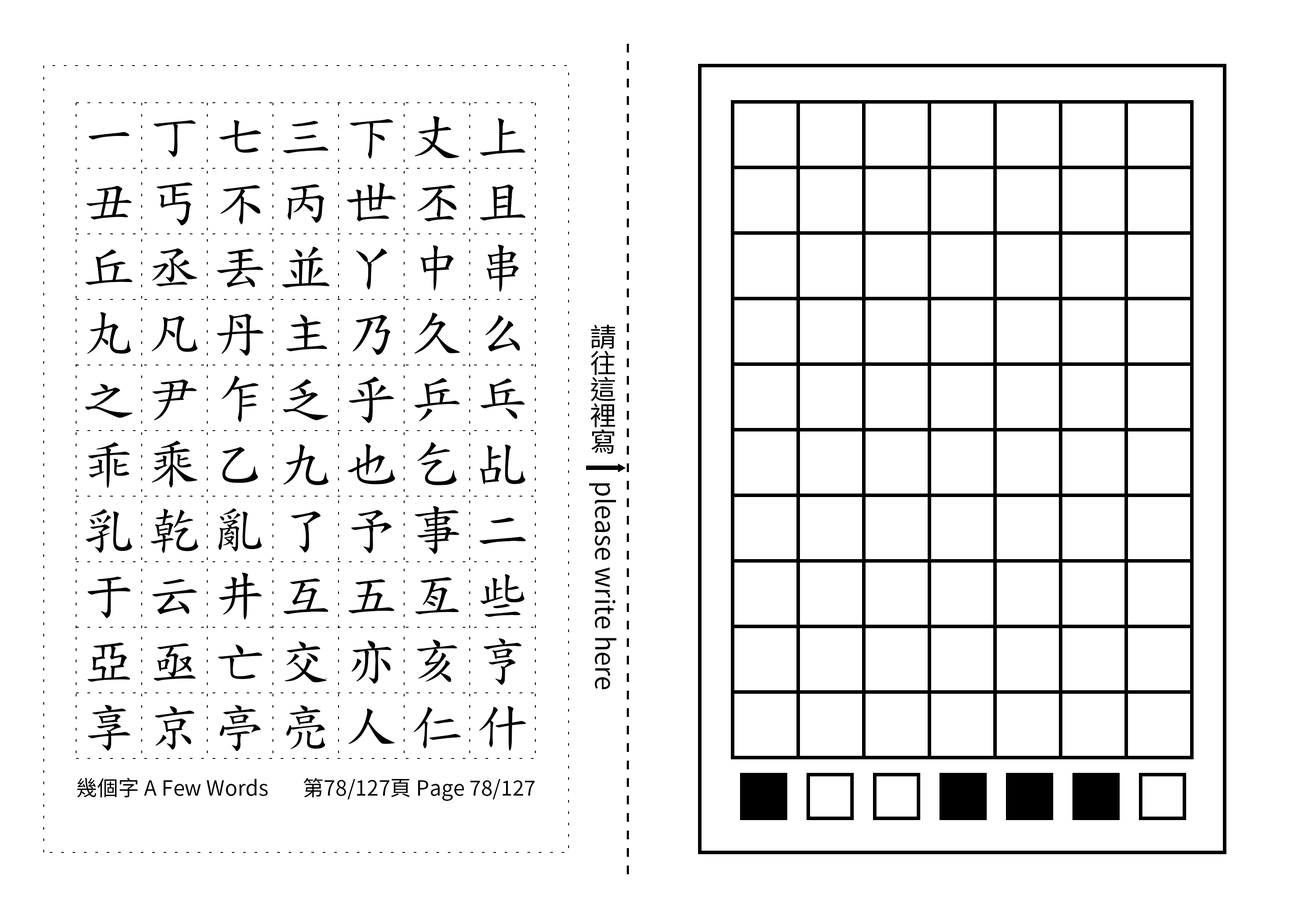
<style>
.page{position:relative;width:1299px;height:918px;background:#ffffff}
.page>*{position:absolute;margin:0}
.t1{font:52.5px/65.6px "TW-Kai-98_1";letter-spacing:0.25em;color:#000000}
.t2{font:26.2px "SourceHanSansTC-Regular";color:#000000}
.t3{font:21px "SourceHanSansTC-Regular";color:#000000}
</style>
<div class="page">
<p class="t1" style="left:85px;top:116px;width:441px;height:636px;text-align:center">一丁七三下丈上丑丐不丙世丕且丘丞丟並丫中串丸凡丹主乃久么之尹乍乏乎乒乓乖乘乙九也乞乩乳乾亂了予事二于云井互五亙些亞亟亡交亦亥亨享京亭亮人仁什</p>
<p class="t2" style="left:589px;top:324px;width:28px;height:366px;text-align:center">請往這裡寫　please write here</p>
<p class="t3" style="left:77px;top:778px;width:191px;height:20px">幾個字 A Few Words</p>
<p class="t3" style="left:303px;top:778px;width:232px;height:23px">第78/127頁 Page 78/127</p>
</div>
